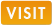
<style>
.page{position:relative;width:52px;height:25px}
.page>*{position:absolute;margin:0}
.t1{font:15.2px "Futura-Heavy";letter-spacing:0.1em;color:#fefefe;text-transform:uppercase}
</style>
<div class="page">
<p class="t1" style="left:6px;top:7px;width:40px;height:12px">Visit</p>
</div>
